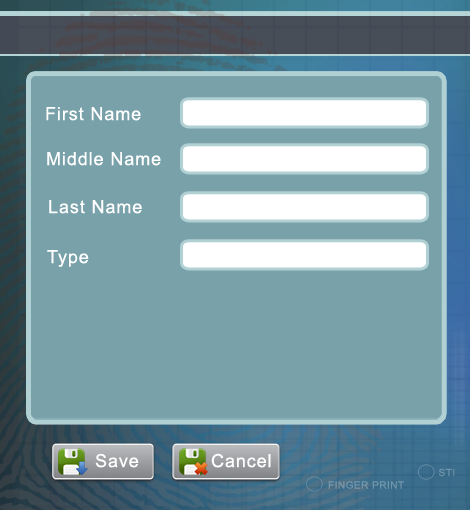
<style>
.page{position:relative;width:470px;height:510px;background:#79a1aa}
.page>*{position:absolute;margin:0}
.t1{font:18px "ArialMT";letter-spacing:0.05em;color:#ffffff}
.t2{font:10px "ArialMT";letter-spacing:0.05em;color:#6f94aa}
.t3{font:10px "ArialMT";letter-spacing:0.05em;color:#7195aa}
</style>
<div class="page">
<p class="t1" style="left:46px;top:107px;width:95px;height:14px">First Name</p>
<p class="t1" style="left:47px;top:152px;width:114px;height:14px">Middle Name</p>
<p class="t1" style="left:49px;top:200px;width:93px;height:14px">Last Name</p>
<p class="t1" style="left:47px;top:250px;width:42px;height:17px">Type</p>
<p class="t1" style="left:95px;top:453px;width:44px;height:15px">Save</p>
<p class="t1" style="left:211px;top:453px;width:60px;height:15px">Cancel</p>
<p class="t2" style="left:439px;top:468px;width:16px;height:9px">STI</p>
<p class="t3" style="left:328px;top:481px;width:76px;height:8px">FINGER PRINT</p>
</div>
